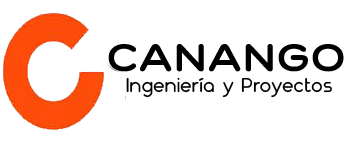
<style>
.page{position:relative;width:350px;height:150px;background:#ffffff}
.page>*{position:absolute;margin:0}
.t1{font:38px "LawyerGothic-Bold";letter-spacing:-0.01em;color:#000000}
.t2{font:20px "Nokio-Medium";letter-spacing:-0.01em;color:#000000}
</style>
<div class="page">
<p class="t1" style="left:108px;top:44px;width:236px;height:28px">CANANGO</p>
<p class="t2" style="left:126px;top:77px;width:206px;height:21px">Ingeniería y Proyectos</p>
</div>
